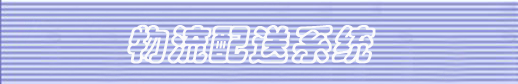
<style>
.page{position:relative;width:518px;height:84px}
.page>*{position:absolute;margin:0}
.t1{font:40px "STCaiyun";color:#fafafb;font-weight:bold;font-style:italic}
</style>
<div class="page">
<p class="t1" style="left:127px;top:24px;width:249px;height:40px">物流配送系统</p>
</div>
